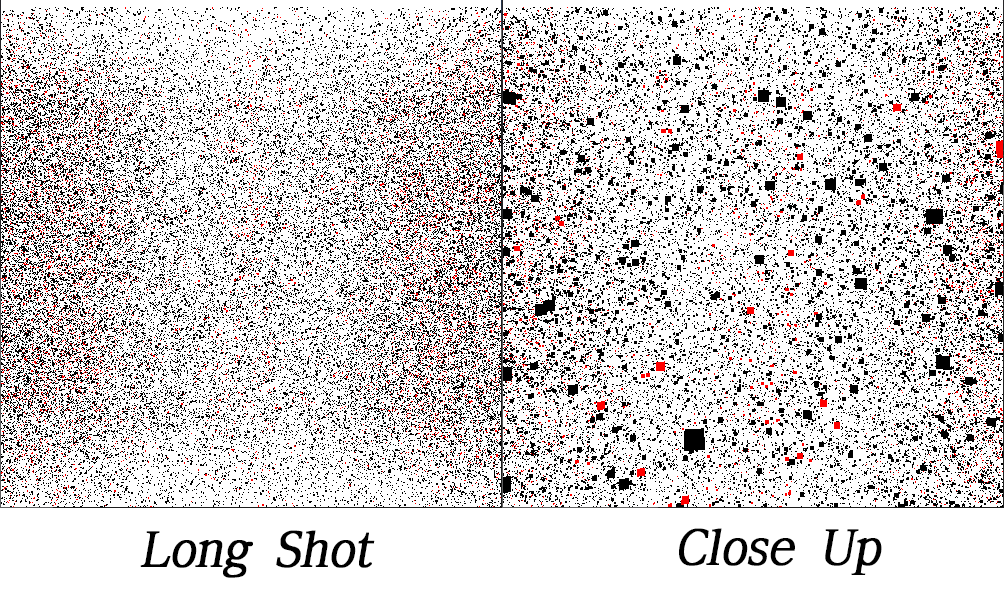
<style>
.page{position:relative;width:1004px;height:600px;background:#ffffff}
.page>*{position:absolute;margin:0}
.t1{font:48px "ÈÞ¸Õ¸íÁ¶";color:#000000;font-weight:bold;font-style:italic}
</style>
<div class="page">
<p class="t1" style="left:140px;top:530px;width:235px;height:48px">Long Shot</p>
<p class="t1" style="left:679px;top:528px;width:203px;height:47px">Close Up</p>
</div>
